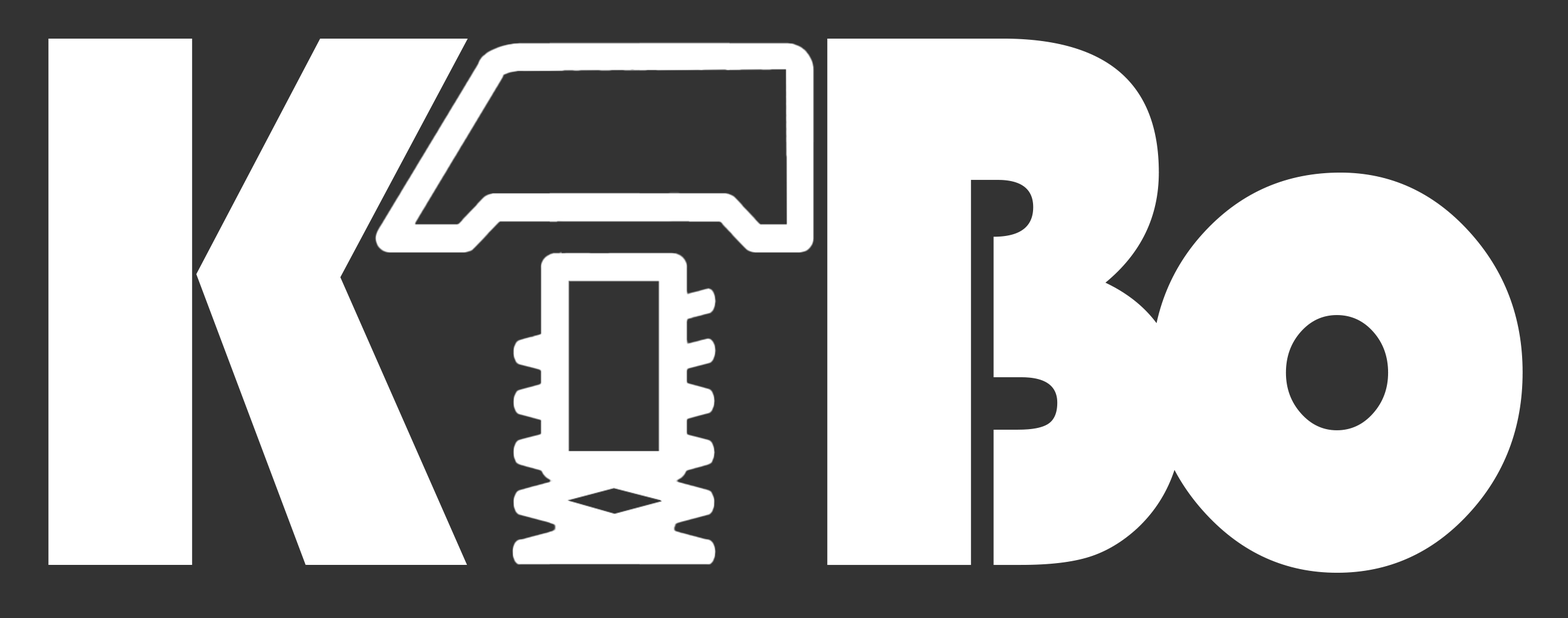
<style>
.page{position:relative;width:1568px;height:618px;background:#ffffff}
.page>*{position:absolute;margin:0}
.t1{font:789.7px "Bauhaus93";letter-spacing:-0.08em;color:#ffffff;scale:0.92 1}
</style>
<div class="page">
<p class="t1" style="left:48px;top:39px;width:1475px;height:534px">K   Bo</p>
</div>
